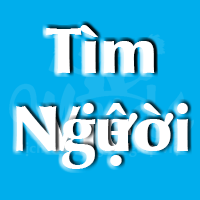
<style>
.page{position:relative;width:200px;height:200px;background:#00aeec}
.page>*{position:absolute;margin:0}
.t1{font:65px "UVNNhanNang";color:#ffffff}
</style>
<div class="page">
<p class="t1" style="left:16px;top:25px;width:172px;height:144px;text-align:center">Tìm<br>Người</p>
<p class="t1" style="left:39px;top:25px;width:124px;height:141px;text-align:center">Tìm<br>Việc</p>
</div>
